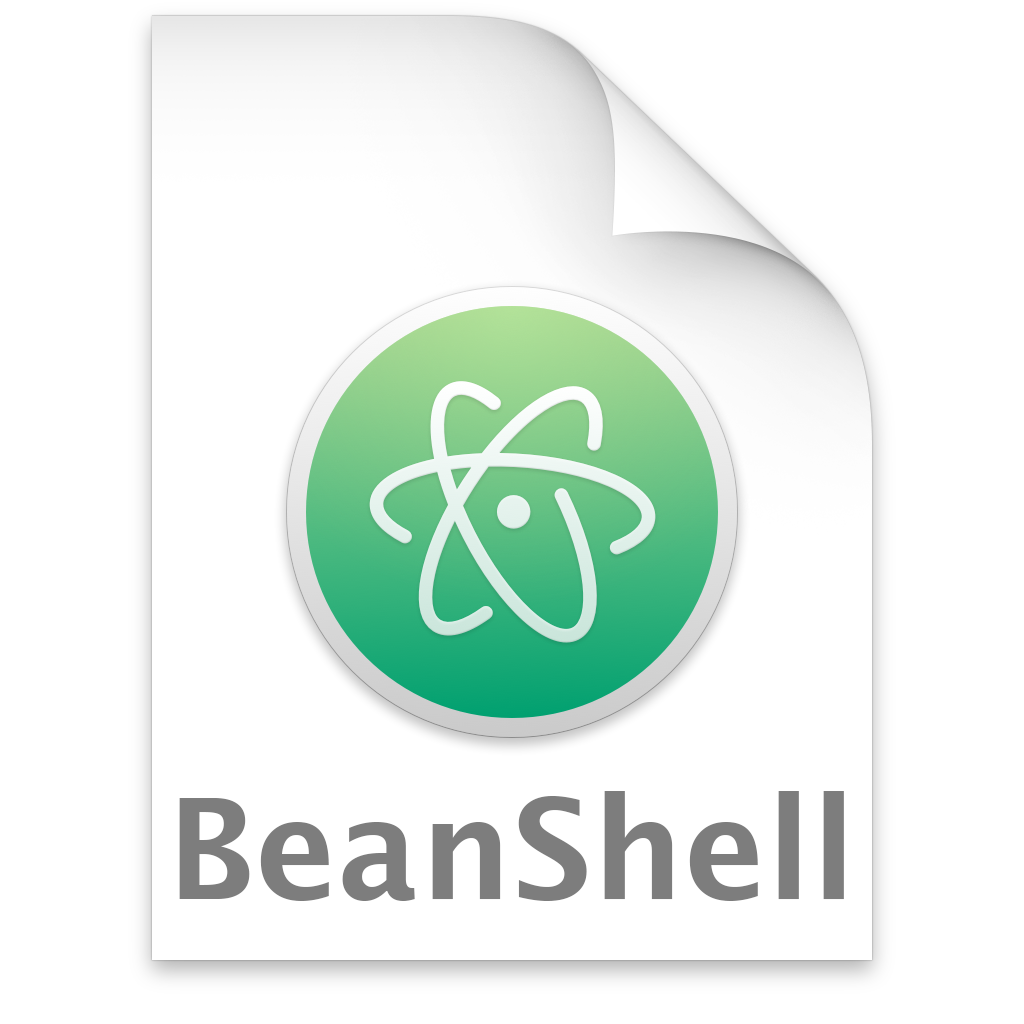
<style>
.page{position:relative;width:1024px;height:1024px;background:#ffffff}
.page>*{position:absolute;margin:0}
.t1{font:140px "LucidaGrande-Bold";color:#7d7d7d}
</style>
<div class="page">
<p class="t1" style="left:179px;top:791px;width:665px;height:110px">BeanShell</p>
</div>
